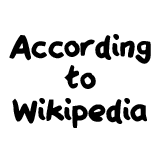
<style>
.page{position:relative;width:160px;height:160px;background:#ffffff}
.page>*{position:absolute;margin:0}
.t1{font:35.9px/31.9px "QAReports";color:#000000}
</style>
<div class="page">
<p class="t1" style="left:9px;top:34px;width:142px;height:94px;text-align:center">According<br>to<br>Wikipedia</p>
</div>
